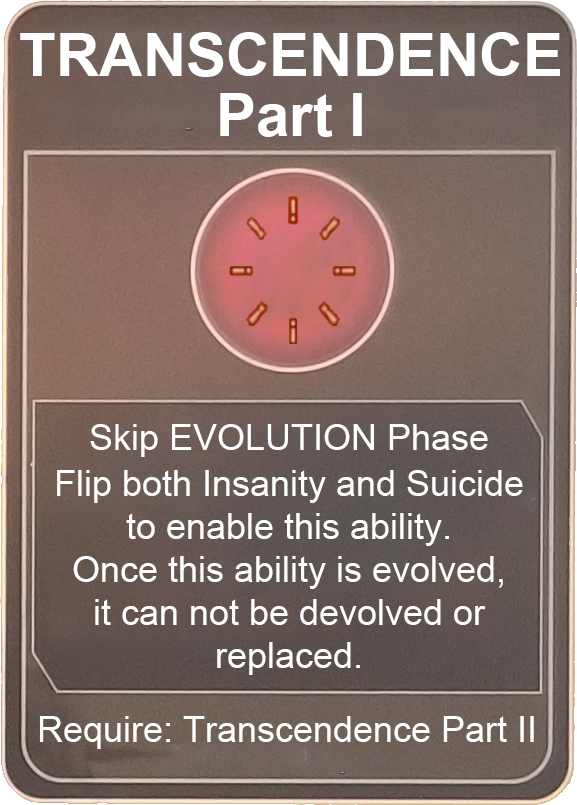
<style>
.page{position:relative;width:577px;height:805px}
.page>*{position:absolute;margin:0}
.t1{font:60px/60px "Arial-BoldMT";color:#ffffff}
.t2{font:36px "ArialMT";color:#ffffff}
</style>
<div class="page">
<p class="t1" style="left:20px;top:32px;width:540px;height:105px;text-align:center">TRANSCENDENCE<br>Part I</p>
<p class="t2" style="left:90px;top:424px;width:398px;height:33px">Skip EVOLUTION Phase</p>
<p class="t2" style="left:57px;top:470px;width:466px;height:205px;text-align:center">Flip both Insanity and Suicide to enable this ability.<br>Once this ability is evolved,<br>it can not be devolved or replaced.</p>
<p class="t2" style="left:40px;top:716px;width:494px;height:33px">Require: Transcendence Part II</p>
</div>
